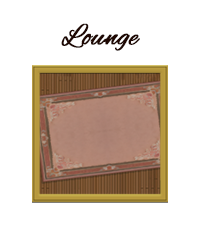
<style>
.page{position:relative;width:200px;height:250px;background:#ffffff}
.page>*{position:absolute;margin:0}
.t1{font:30px "AlexBrush-Regular";color:#1f0803;font-weight:bold}
</style>
<div class="page">
<p class="t1" style="left:61px;top:23px;width:79px;height:28px">Lounge</p>
</div>
